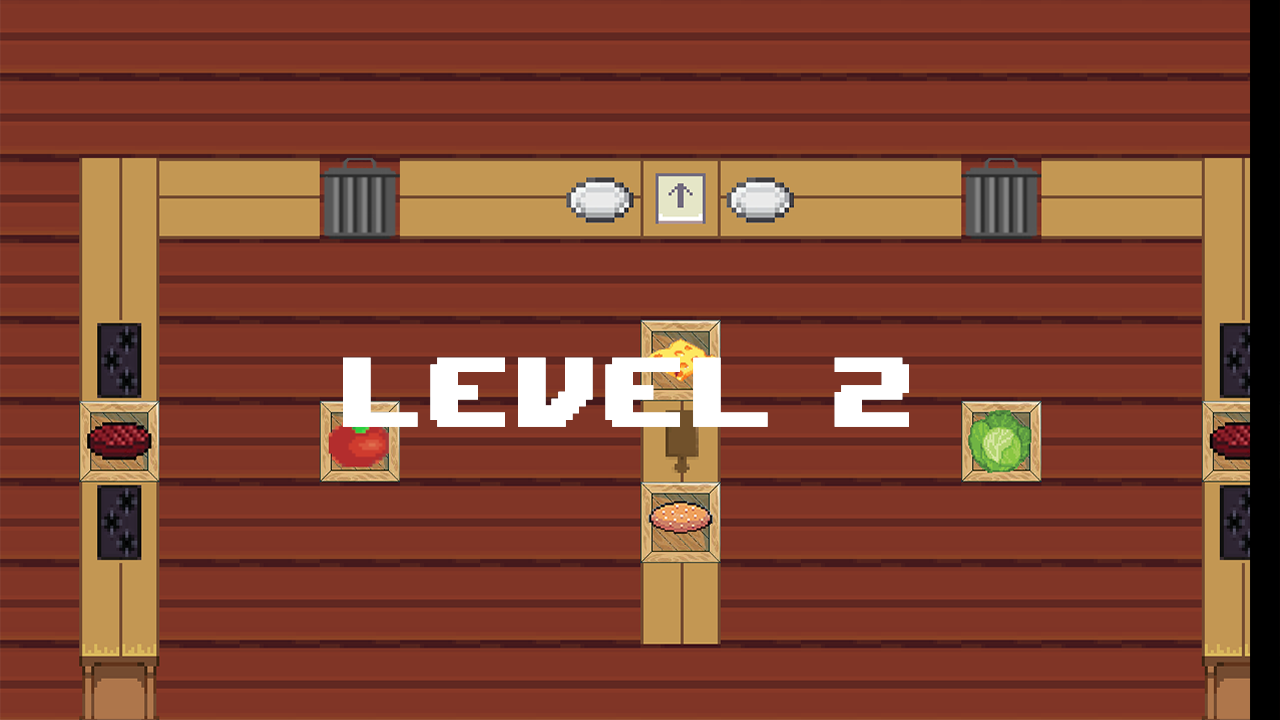
<style>
.page{position:relative;width:1280px;height:720px;background:#803526}
.page>*{position:absolute;margin:0}
.t1{font:136.7px "UpheavalTT-BRK-";letter-spacing:0.025em;color:#ffffff;font-weight:bold}
</style>
<div class="page">
<p class="t1" style="left:343px;top:357px;width:566px;height:70px">LEVEL 2</p>
<p class="t1" style="left:343px;top:357px;width:566px;height:70px">LEVEL 2</p>
</div>
